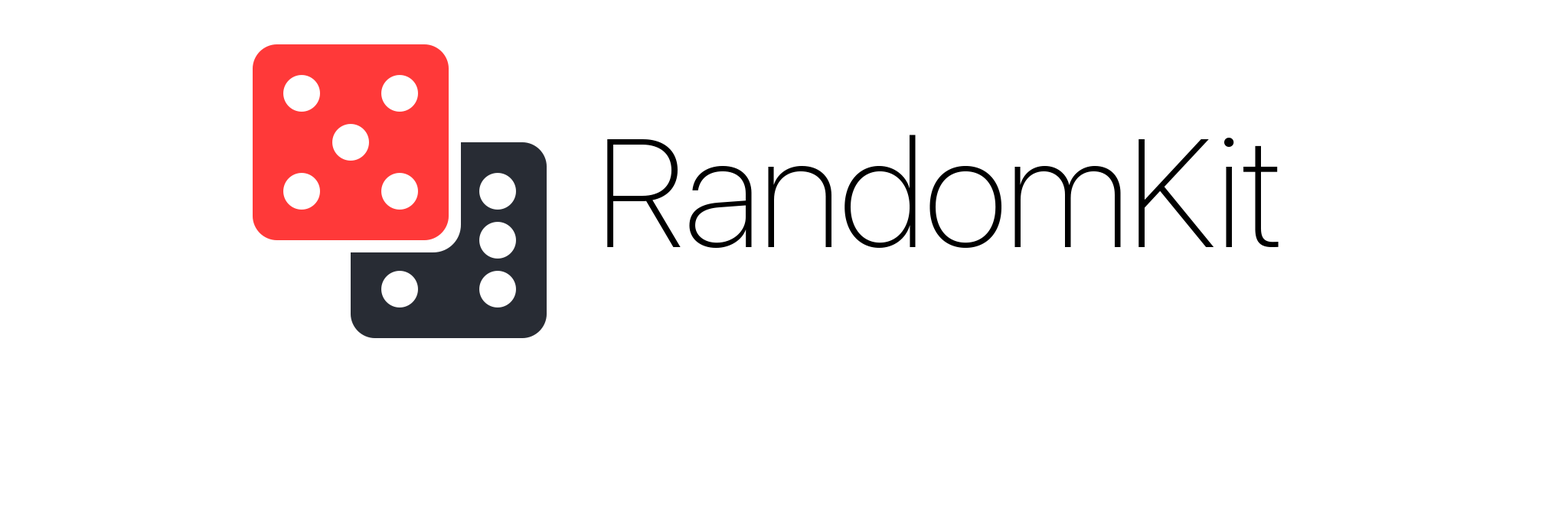
<style>
.page{position:relative;width:1568px;height:511px;background:#ffffff}
.page>*{position:absolute;margin:0}
.t1{font:153.1px "SFUIDisplay-Thin";color:#000000}
</style>
<div class="page">
<p class="t1" style="left:607px;top:135px;width:672px;height:113px">RandomKit</p>
</div>
